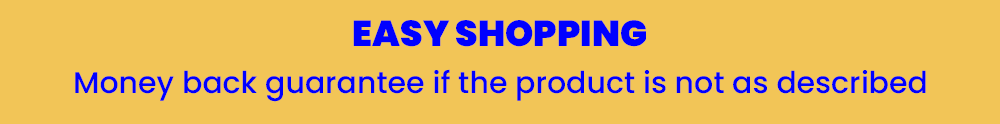
<style>
.page{position:relative;width:1000px;height:124px;background:#f2c557}
.page>*{position:absolute;margin:0}
.t1{font:36px "Poppins-Black";color:#0000ff}
.t2{font:30px "Poppins-Medium";color:#0000ff}
</style>
<div class="page">
<p class="t1" style="left:353px;top:20px;width:293px;height:27px">EASY SHOPPING</p>
<p class="t2" style="left:75px;top:69px;width:851px;height:33px">Money back guarantee if the product is not as described</p>
</div>
